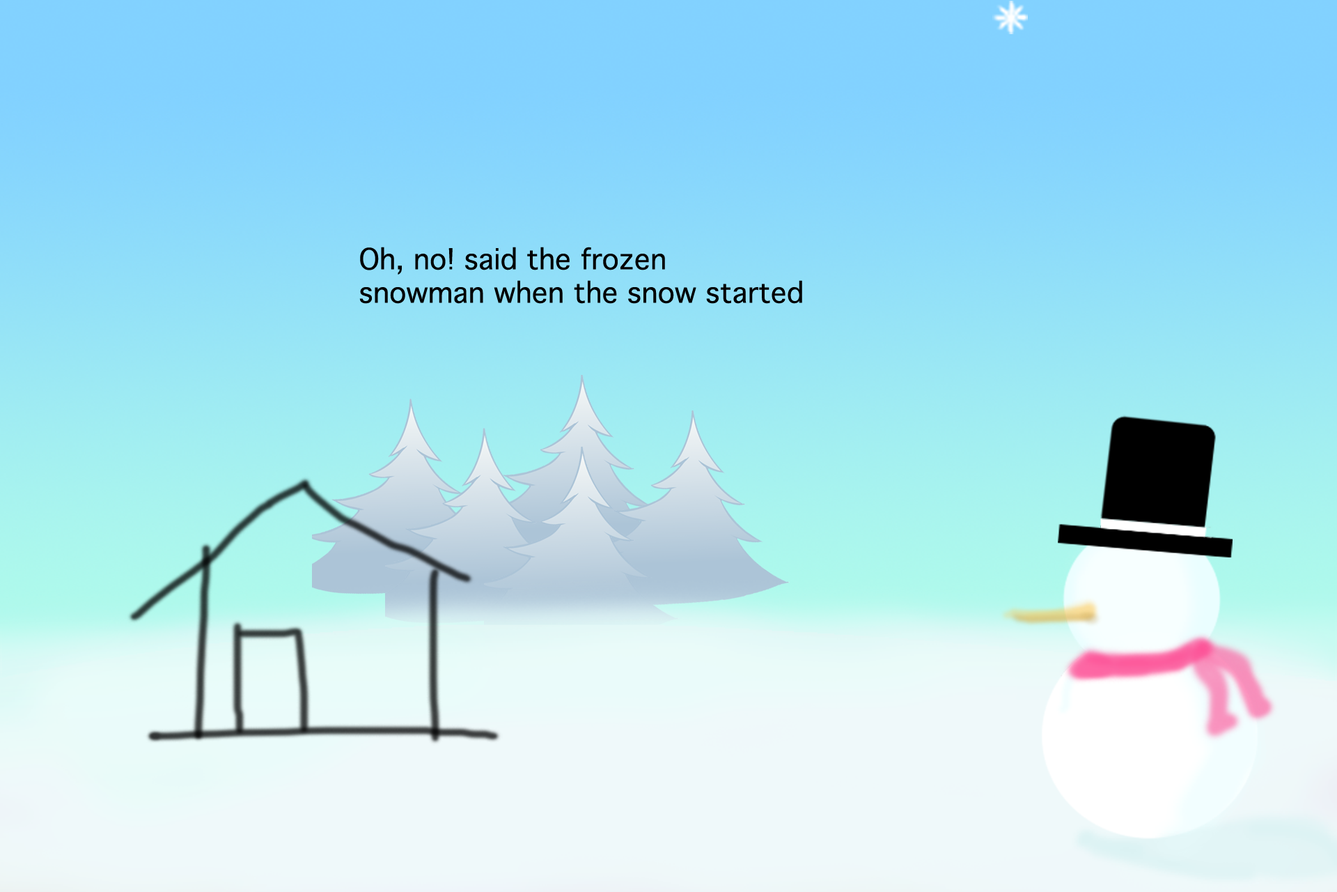
<style>
.page{position:relative;width:1337px;height:892px}
.page>*{position:absolute;margin:0}
.t1{font:27.9px "Geneva";color:#000000}
</style>
<div class="page">
<p class="t1" style="left:359px;top:247px;width:443px;height:57px">Oh, no! said the frozen<br>snowman when the snow started</p>
</div>
